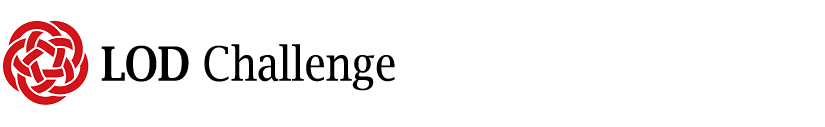
<style>
.page{position:relative;width:825px;height:127px;background:#ffffff}
.page>*{position:absolute;margin:0}
.t1{font:47px "LucidaBright";color:#000000;scale:0.87 1}
.t2{font:47px "LucidaBright-Demi";color:#000000;scale:0.87 1}
</style>
<div class="page">
<p class="t1" style="left:101px;top:44px;width:294px;height:47px"><span class="t2">LOD</span> Challenge</p>
</div>
